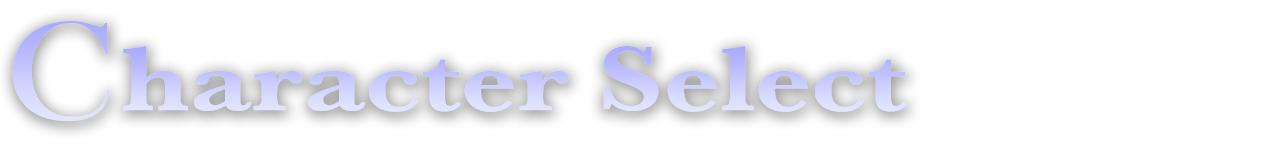
<style>
.page{position:relative;width:1280px;height:160px;background:#ffffff}
.page>*{position:absolute;margin:0}
.t1{font:144.4px "BaskOldFace";letter-spacing:-0.005em;scale:1.13 1}
.t2{font:94.3px "BaskervilleURW-Bol";letter-spacing:-0.005em;color:#cfd1ff;scale:1.25 1}
</style>
<div class="page">
<p class="t1" style="left:12px;top:21px;width:98px;height:100px">C</p>
<p class="t2" style="left:123px;top:45px;width:784px;height:67px">haracter Select</p>
</div>
